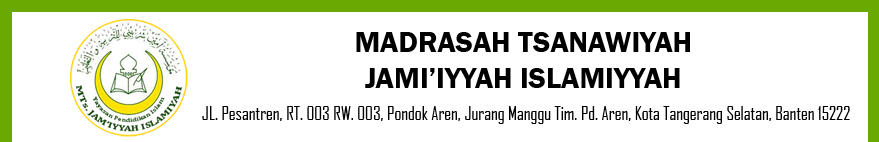
<style>
.page{position:relative;width:879px;height:142px;background:#ffffff}
.page>*{position:absolute;margin:0}
.t1{font:30px "FranklinGothic-Demi";color:#000000}
.t2{font:18px "AgencyFB-Reg";color:#000000}
</style>
<div class="page">
<p class="t1" style="left:356px;top:32px;width:334px;height:56px;text-align:center">MADRASAH TSANAWIYAH<br>JAMI’IYYAH ISLAMIYYAH</p>
<p class="t2" style="left:202px;top:106px;width:648px;height:18px">JL. Pesantren, RT. 003 RW. 003, Pondok Aren, Jurang Manggu Tim. Pd. Aren, Kota Tangerang Selatan, Banten 15222</p>
</div>
